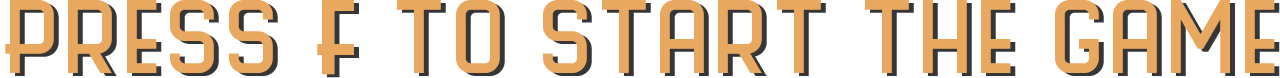
<style>
.page{position:relative;width:1280px;height:78px;background:#ffffff}
.page>*{position:absolute;margin:0}
.t1{font:97.4px "ScienceFair";letter-spacing:0.05em;color:#e9a860}
.t2{font:97.4px "ScienceFair";letter-spacing:0.05em;color:#e9a860;font-weight:bold}
</style>
<div class="page">
<p class="t1" style="left:5px;top:0px;width:1270px;height:75px">Press <span class="t2">F</span> to start the game</p>
</div>
